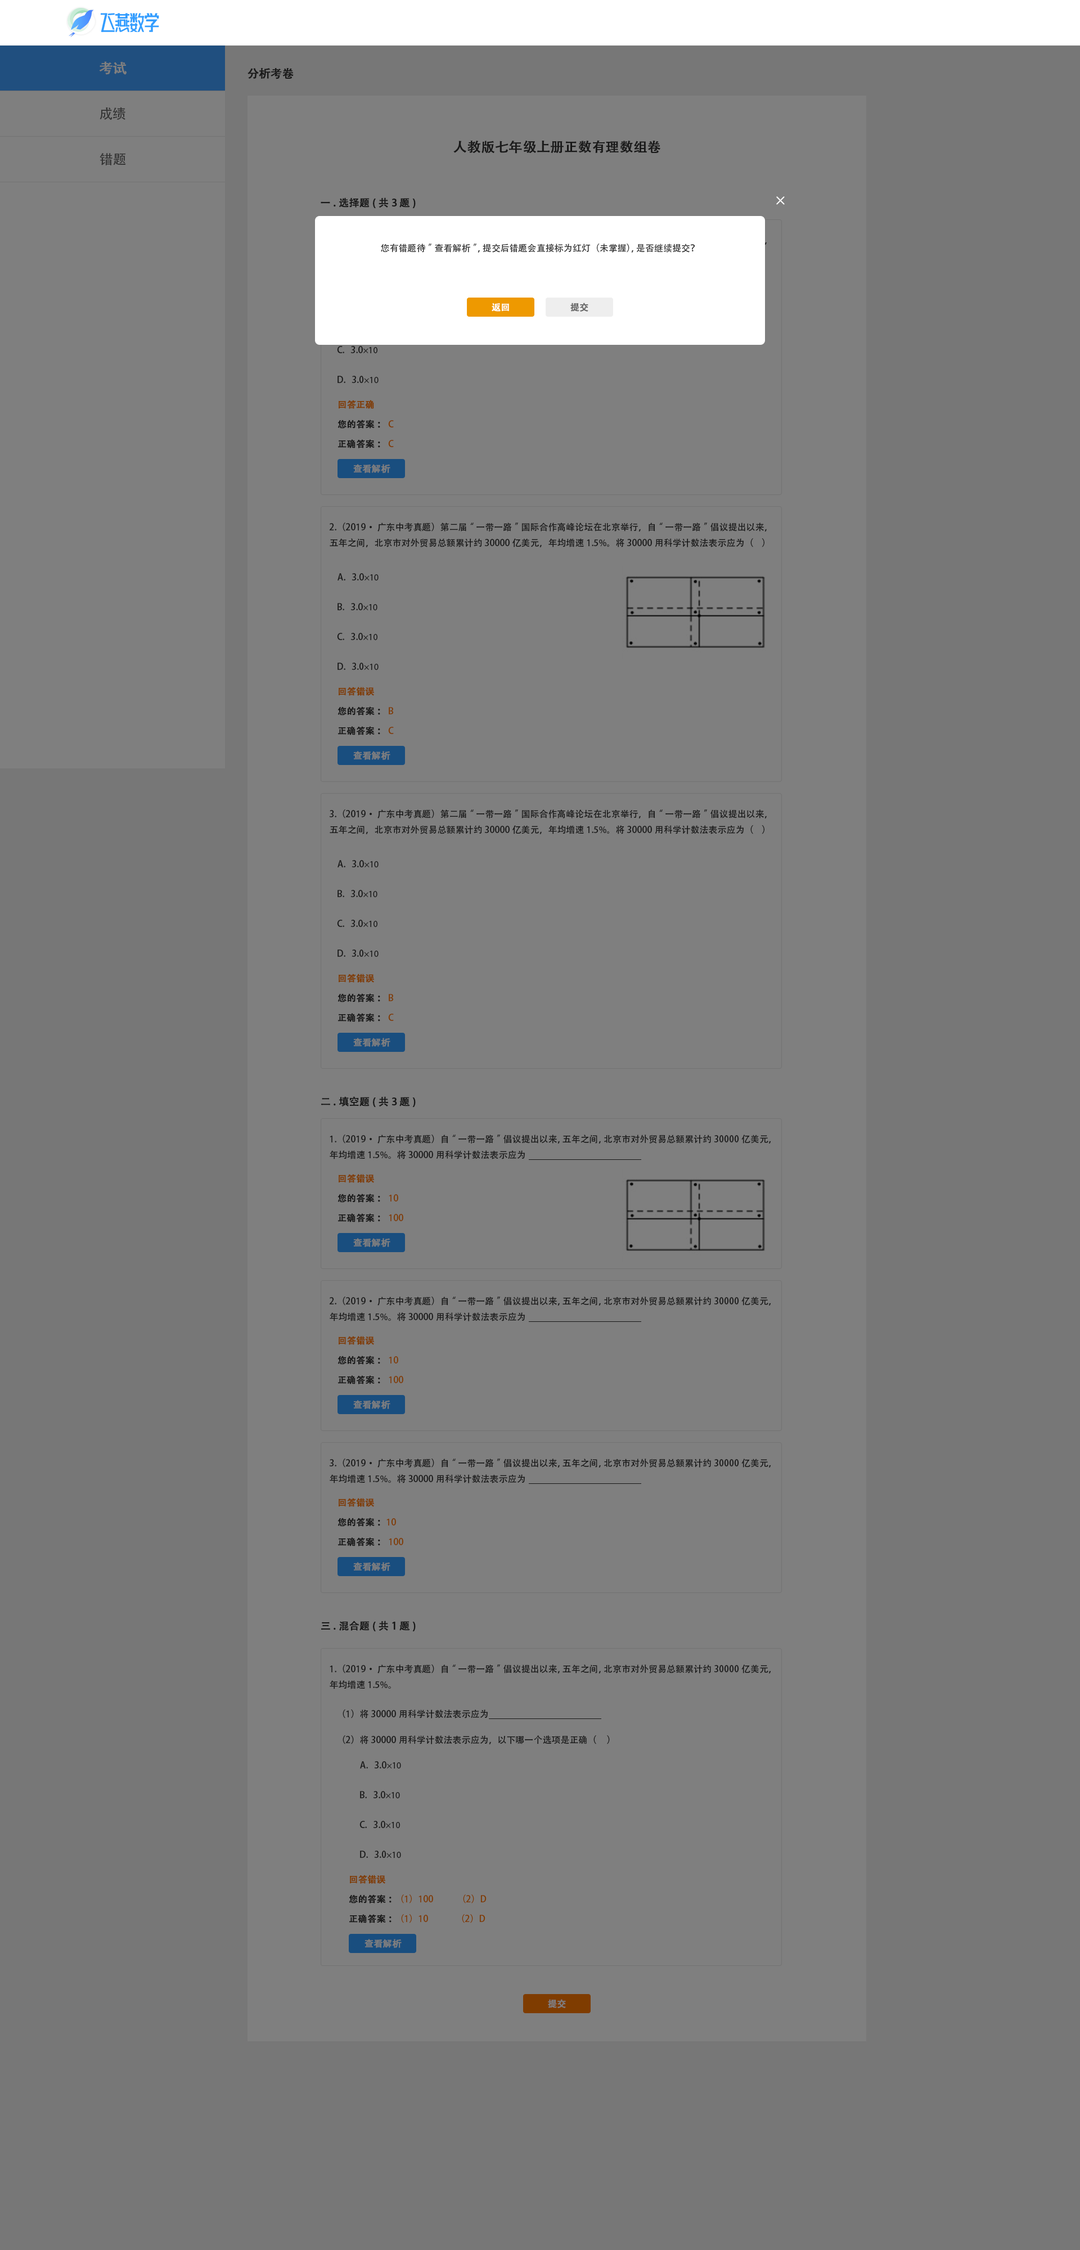
<style>
.page{position:relative;width:1080px;height:2250px;background:#7f7f7f}
.page>*{position:absolute;margin:0}
.t1{font:13.5px "AdobeHeitiStd-Regular";color:#7f7f7f;font-weight:bold}
.t2{font:11.2px "AdobeHeitiStd-Regular";color:#191919;font-weight:bold}
.t3{font:13.5px "AdobeHeitiStd-Regular";color:#333333}
.t4{font:13.5px "AdobeHeitiStd-Regular";color:#191919;font-weight:bold}
.t5{font:10.1px "AdobeHeitiStd-Regular";color:#191919;font-weight:bold}
.t6{font:9px "AdobeHeitiStd-Regular";color:#333333}
.t7{font:9px "AdobeHeitiStd-Regular";color:#ffffff;font-weight:bold}
.t8{font:9px "AdobeHeitiStd-Regular";color:#666666;font-weight:bold}
.t9{font:9px "AdobeHeitiStd-Regular";color:#191919}
.t10{font:9px "MyriadPro-Regular";color:#191919}
.t11{font:9px "AdobeHeitiStd-Regular";color:#7f3c00;font-weight:bold}
.t12{font:9px "AdobeHeitiStd-Regular";color:#191919;font-weight:bold}
.t13{font:9px "AdobeHeitiStd-Regular";color:#7f7f7f;font-weight:bold}
</style>
<div class="page">
<p class="t1" style="left:99px;top:61px;width:28px;height:14px">考试</p>
<p class="t2" style="left:248px;top:68px;width:46px;height:11px">分析考卷</p>
<p class="t3" style="left:100px;top:107px;width:25px;height:13px">成绩</p>
<p class="t4" style="left:453px;top:140px;width:207px;height:14px">人教版七年级上册正数有理数组卷</p>
<p class="t3" style="left:100px;top:153px;width:26px;height:12px">错题</p>
<p class="t5" style="left:321px;top:197px;width:95px;height:12px">一.选择题(共3题)</p>
<p class="t6" style="left:381px;top:244px;width:314px;height:9px">您有错题待”查看解析”，提交后错题会直接标为红灯（未掌握），是否继续提交？</p>
<p class="t7" style="left:492px;top:303px;width:17px;height:9px">返回</p>
<p class="t8" style="left:570px;top:303px;width:18px;height:9px">提交</p>
<p class="t9" style="left:337px;top:346px;width:40px;height:7px">C.   3.0<span class="t10">×10</span></p>
<p class="t9" style="left:338px;top:376px;width:41px;height:7px">D.   3.0<span class="t10">×10</span></p>
<p class="t11" style="left:339px;top:400px;width:35px;height:9px">回答正确</p>
<p class="t12" style="left:338px;top:420px;width:56px;height:9px">您的答案：<span class="t9">C</span></p>
<p class="t12" style="left:338px;top:439px;width:56px;height:9px">正确答案：<span class="t9">C</span></p>
<p class="t13" style="left:353px;top:464px;width:37px;height:9px">查看解析</p>
<p class="t9" style="left:329px;top:523px;width:438px;height:24px">2.（2019·广东中考真题）第二届“一带一路”国际合作高峰论坛在北京举行，自“一带一路”倡议提出以来，五年之间，北京市对外贸易总额累计约30000亿美元，年均增速1.5%。将30000用科学计数法表示应为（    ）</p>
<p class="t9" style="left:338px;top:573px;width:41px;height:7px">A.   3.0<span class="t10">×10</span></p>
<p class="t9" style="left:338px;top:603px;width:39px;height:7px">B.   3.0<span class="t10">×10</span></p>
<p class="t9" style="left:337px;top:633px;width:40px;height:7px">C.   3.0<span class="t10">×10</span></p>
<p class="t9" style="left:338px;top:663px;width:41px;height:7px">D.   3.0<span class="t10">×10</span></p>
<p class="t11" style="left:339px;top:687px;width:35px;height:9px">回答错误</p>
<p class="t12" style="left:338px;top:706px;width:56px;height:10px">您的答案：<span class="t9">B</span></p>
<p class="t12" style="left:338px;top:726px;width:56px;height:9px">正确答案：<span class="t9">C</span></p>
<p class="t13" style="left:353px;top:751px;width:37px;height:9px">查看解析</p>
<p class="t9" style="left:329px;top:809px;width:438px;height:25px">3.（2019·广东中考真题）第二届“一带一路”国际合作高峰论坛在北京举行，自“一带一路”倡议提出以来，五年之间，北京市对外贸易总额累计约30000亿美元，年均增速1.5%。将30000用科学计数法表示应为（    ）</p>
<p class="t9" style="left:338px;top:860px;width:41px;height:7px">A.   3.0<span class="t10">×10</span></p>
<p class="t9" style="left:338px;top:890px;width:39px;height:7px">B.   3.0<span class="t10">×10</span></p>
<p class="t9" style="left:337px;top:920px;width:40px;height:7px">C.   3.0<span class="t10">×10</span></p>
<p class="t9" style="left:338px;top:950px;width:41px;height:7px">D.   3.0<span class="t10">×10</span></p>
<p class="t11" style="left:339px;top:974px;width:35px;height:9px">回答错误</p>
<p class="t12" style="left:338px;top:993px;width:56px;height:9px">您的答案：<span class="t9">B</span></p>
<p class="t12" style="left:338px;top:1013px;width:56px;height:9px">正确答案：<span class="t9">C</span></p>
<p class="t13" style="left:353px;top:1038px;width:37px;height:9px">查看解析</p>
<p class="t5" style="left:321px;top:1096px;width:95px;height:12px">二.填空题(共3题)</p>
<p class="t9" style="left:330px;top:1135px;width:441px;height:24px">1.（2019·广东中考真题）自“一带一路”倡议提出以来，五年之间，北京市对外贸易总额累计约30000亿美元，年均增速1.5%。将30000用科学计数法表示应为</p>
<p class="t11" style="left:339px;top:1174px;width:35px;height:9px">回答错误</p>
<p class="t12" style="left:338px;top:1194px;width:60px;height:9px">您的答案：<span class="t9">10</span></p>
<p class="t12" style="left:338px;top:1213px;width:65px;height:9px">正确答案：<span class="t9">100</span></p>
<p class="t13" style="left:353px;top:1238px;width:37px;height:9px">查看解析</p>
<p class="t9" style="left:329px;top:1297px;width:442px;height:24px">2.（2019·广东中考真题）自“一带一路”倡议提出以来，五年之间，北京市对外贸易总额累计约30000亿美元，年均增速1.5%。将30000用科学计数法表示应为</p>
<p class="t11" style="left:339px;top:1336px;width:35px;height:9px">回答错误</p>
<p class="t12" style="left:338px;top:1356px;width:60px;height:9px">您的答案：<span class="t9">10</span></p>
<p class="t12" style="left:338px;top:1375px;width:65px;height:9px">正确答案：<span class="t9">100</span></p>
<p class="t13" style="left:353px;top:1400px;width:37px;height:9px">查看解析</p>
<p class="t9" style="left:329px;top:1459px;width:442px;height:24px">3.（2019·广东中考真题）自“一带一路”倡议提出以来，五年之间，北京市对外贸易总额累计约30000亿美元，年均增速1.5%。将30000用科学计数法表示应为</p>
<p class="t11" style="left:339px;top:1498px;width:35px;height:9px">回答错误</p>
<p class="t12" style="left:338px;top:1518px;width:58px;height:9px">您的答案:<span class="t9">10</span></p>
<p class="t12" style="left:338px;top:1537px;width:65px;height:9px">正确答案：<span class="t9">100</span></p>
<p class="t13" style="left:353px;top:1562px;width:37px;height:9px">查看解析</p>
<p class="t5" style="left:321px;top:1621px;width:95px;height:11px">三.混合题(共1题)</p>
<p class="t9" style="left:330px;top:1664px;width:441px;height:25px">1.（2019·广东中考真题）自“一带一路”倡议提出以来，五年之间，北京市对外贸易总额累计约30000亿美元，年均增速1.5%。</p>
<p class="t9" style="left:343px;top:1709px;width:145px;height:9px">（1）将30000用科学计数法表示应为</p>
<p class="t9" style="left:343px;top:1735px;width:267px;height:9px">（2）将30000用科学计数法表示应为，以下哪一个选项是正确（     ）</p>
<p class="t9" style="left:360px;top:1761px;width:41px;height:7px">A.   3.0<span class="t10">×10</span></p>
<p class="t9" style="left:360px;top:1791px;width:40px;height:7px">B.   3.0<span class="t10">×10</span></p>
<p class="t9" style="left:359px;top:1821px;width:41px;height:7px">C.   3.0<span class="t10">×10</span></p>
<p class="t9" style="left:360px;top:1851px;width:41px;height:7px">D.   3.0<span class="t10">×10</span></p>
<p class="t11" style="left:350px;top:1875px;width:35px;height:9px">回答错误</p>
<p class="t9" style="left:349px;top:1894px;width:138px;height:10px"><span class="t12">您的答案：</span>（1）100              （2）D</p>
<p class="t9" style="left:349px;top:1914px;width:136px;height:9px"><span class="t12">正确答案：</span>（1）10                （2）D</p>
<p class="t13" style="left:364px;top:1939px;width:38px;height:9px">查看解析</p>
<p class="t13" style="left:548px;top:1999px;width:18px;height:9px">提交</p>
</div>
